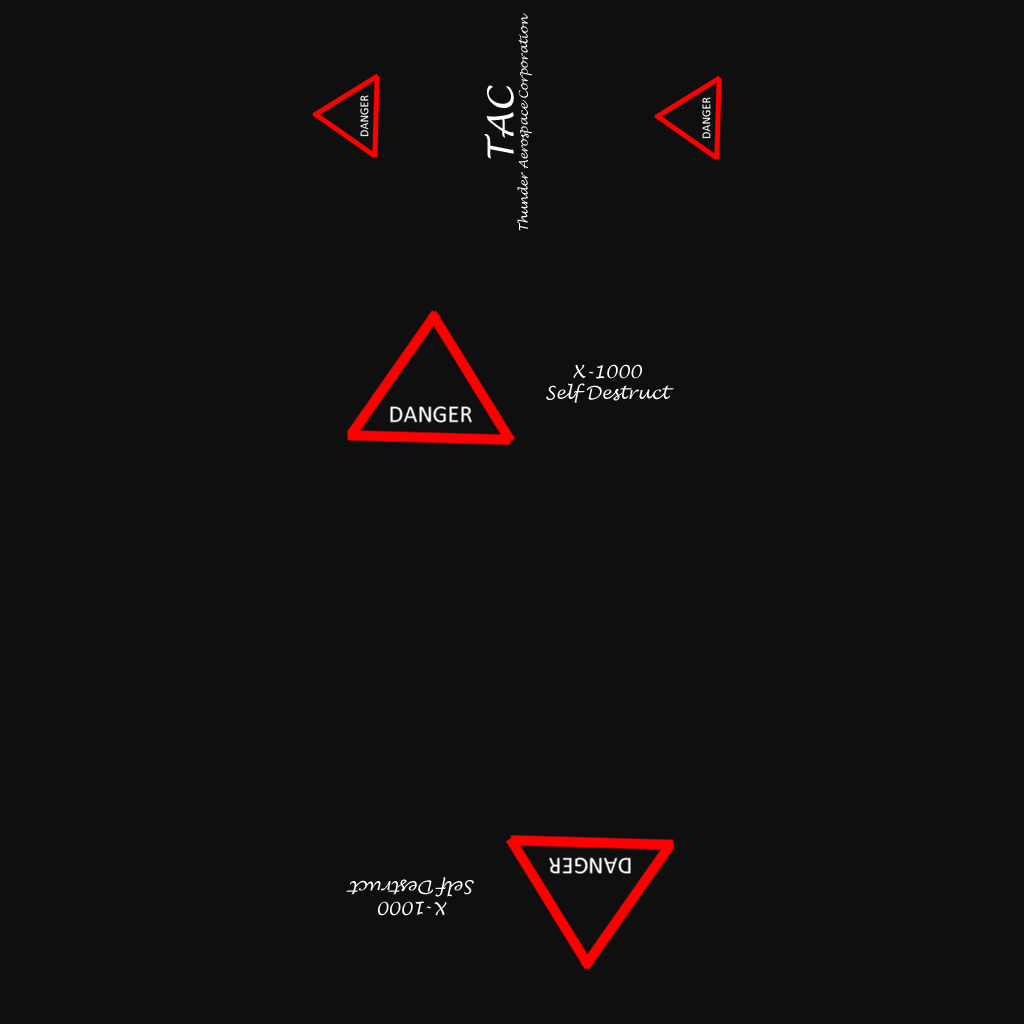
<style>
.page{position:relative;width:1024px;height:1024px;background:#0f0f0f}
.page>*{position:absolute;margin:0}
.t1{font:12px "LucidaHandwriting-Italic";color:#ffffff}
.t2{font:35.9px "LucidaHandwriting-Italic";color:#ffffff}
.t3{font:17.9px "LucidaHandwriting-Italic";color:#ffffff}
</style>
<div class="page">
<p class="t1" style="left:484px;top:13px;width:48px;height:218px;text-align:center;rotate:-90deg"><span class="t2">TAC<br></span>Thunder Aerospace Corporation</p>
<p class="t3" style="left:546px;top:364px;width:128px;height:39px;text-align:center">X-1000<br>Self Destruct</p>
<p class="t3" style="left:346px;top:877px;width:128px;height:39px;text-align:center;rotate:-180deg">X-1000<br>Self Destruct</p>
</div>
